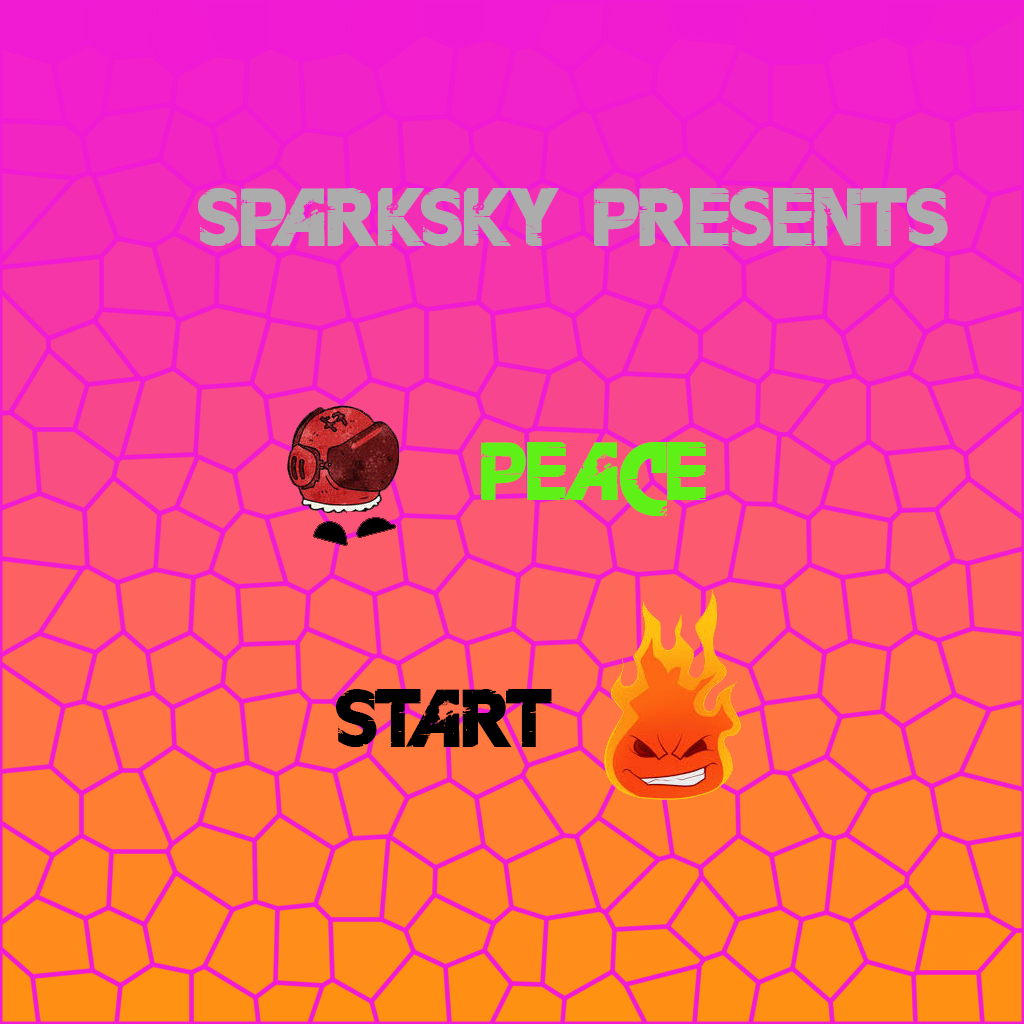
<style>
.page{position:relative;width:1024px;height:1024px}
.page>*{position:absolute;margin:0}
.t1{font:72px "FarCryExtraBold";color:#acacac}
.t2{font:72px "FarCryExtraBold";color:#5ff018}
.t3{font:72px "FarCryExtraBold";color:#000000}
</style>
<div class="page">
<p class="t1" style="left:198px;top:188px;width:750px;height:58px">SPARKSKY PRESENTS</p>
<p class="t2" style="left:481px;top:442px;width:225px;height:74px">PEACE</p>
<p class="t3" style="left:336px;top:689px;width:216px;height:58px">START</p>
</div>
